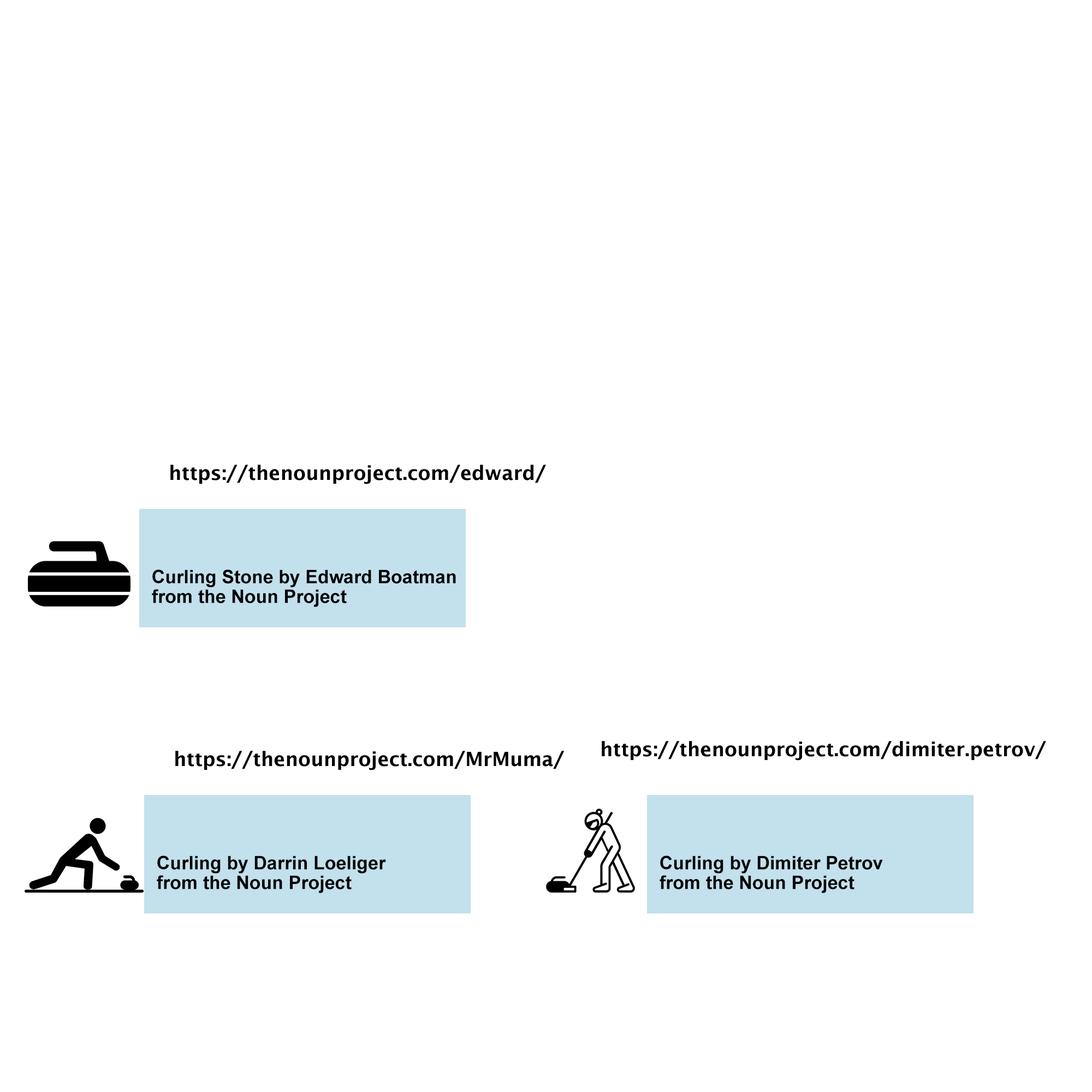
<style>
.page{position:relative;width:1092px;height:1092px;background:#ffffff}
.page>*{position:absolute;margin:0}
.t1{font:19.7px "LucidaSans-Demi";color:#000000}
.t2{font:18.6px/19.7px "Arial-BoldMT";color:#000000}
</style>
<div class="page">
<p class="t1" style="left:170px;top:465px;width:376px;height:19px">https://thenounproject.com/edward/</p>
<p class="t2" style="left:152px;top:569px;width:304px;height:38px">Curling Stone by Edward Boatman<br>from the Noun Project</p>
<p class="t1" style="left:602px;top:741px;width:444px;height:20px">https://thenounproject.com/dimiter.petrov/</p>
<p class="t1" style="left:175px;top:751px;width:389px;height:19px">https://thenounproject.com/MrMuma/</p>
<p class="t2" style="left:157px;top:856px;width:229px;height:37px">Curling by Darrin Loeliger<br>from the Noun Project</p>
<p class="t2" style="left:660px;top:856px;width:223px;height:37px">Curling by Dimiter Petrov<br>from the Noun Project</p>
</div>
